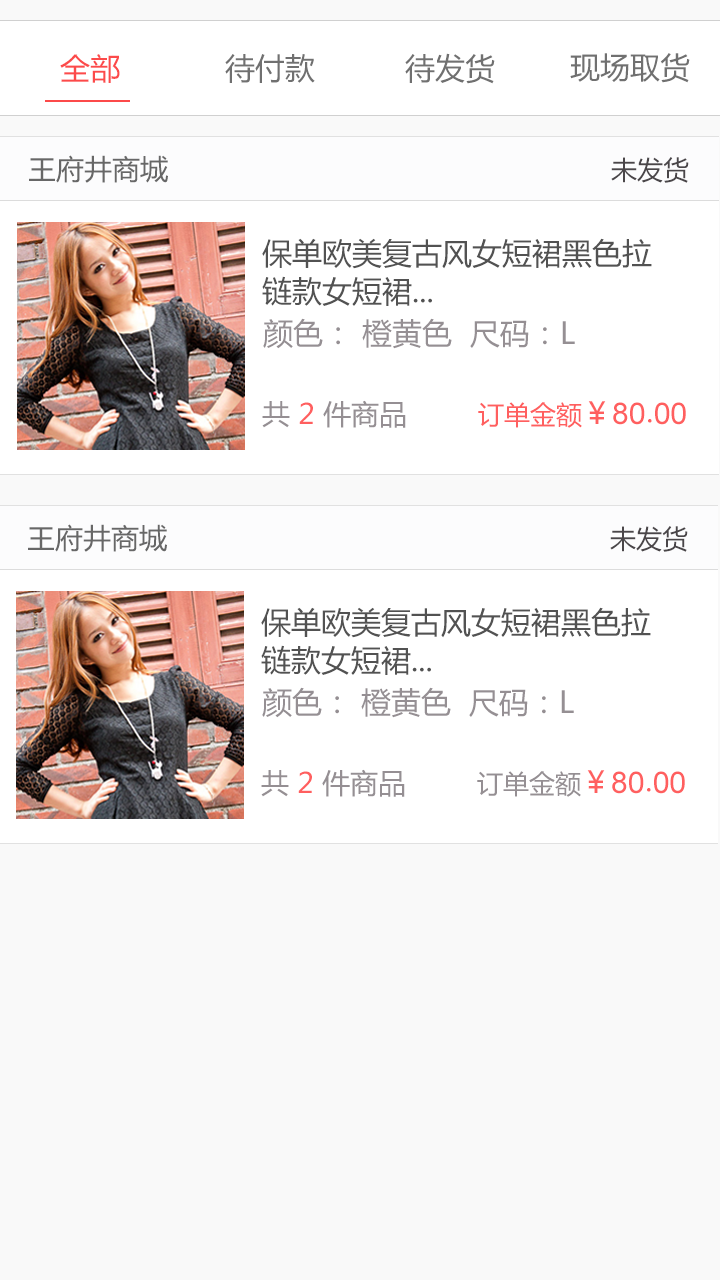
<style>
.page{position:relative;width:720px;height:1280px;background:#f9f9f9}
.page>*{position:absolute;margin:0}
.t1{font:30px "MicrosoftYaHei";color:#fc4a4a}
.t2{font:30px "MicrosoftYaHei";color:#707070}
.t3{font:28px "MicrosoftYaHei";color:#666666}
.t4{font:26px "MicrosoftYaHei";color:#4a4649}
.t5{font:30px/38px "MicrosoftYaHei";color:#525252}
.t6{font:30px "MicrosoftYaHei";color:#958f93}
.t7{font:28px "MicrosoftYaHei";color:#958f93}
.t8{font:28px "MicrosoftYaHei";color:#ff5f5f}
.t9{font:26px "MicrosoftYaHei";color:#ff5f5f}
.t10{font:30px "MicrosoftYaHei";color:#ff5f5f}
.t11{font:30px "ArialMT";color:#ff5f5f}
.t12{font:30px "STHeitiSC-Light";color:#ff5f5f}
.t13{font:26px "MicrosoftYaHei";color:#958f93}
</style>
<div class="page">
<p class="t1" style="left:60px;top:54px;width:60px;height:29px">全部</p>
<p class="t2" style="left:225px;top:54px;width:90px;height:29px">待付款</p>
<p class="t2" style="left:405px;top:53px;width:90px;height:31px">待发货</p>
<p class="t2" style="left:570px;top:53px;width:120px;height:30px">现场取货</p>
<p class="t3" style="left:29px;top:155px;width:139px;height:28px">王府井商城</p>
<p class="t4" style="left:611px;top:157px;width:78px;height:26px">未发货</p>
<p class="t5" style="left:262px;top:238px;width:390px;height:68px">保单欧美复古风女短裙黑色拉<br>链款女短裙...</p>
<p class="t6" style="left:263px;top:318px;width:312px;height:31px">颜色： 橙黄色  尺码：L</p>
<p class="t7" style="left:262px;top:400px;width:144px;height:28px">共 <span class="t8">2 </span>件商品</p>
<p class="t9" style="left:478px;top:401px;width:208px;height:27px">订单金额<span class="t10">￥</span><span class="t11">80</span><span class="t12">.</span><span class="t11">00</span></p>
<p class="t3" style="left:28px;top:524px;width:139px;height:28px">王府井商城</p>
<p class="t4" style="left:610px;top:526px;width:78px;height:26px">未发货</p>
<p class="t5" style="left:261px;top:607px;width:390px;height:68px">保单欧美复古风女短裙黑色拉<br>链款女短裙...</p>
<p class="t6" style="left:262px;top:687px;width:312px;height:31px">颜色： 橙黄色  尺码：L</p>
<p class="t7" style="left:261px;top:769px;width:144px;height:28px">共 <span class="t8">2 </span>件商品</p>
<p class="t13" style="left:477px;top:770px;width:208px;height:27px">订单金额<span class="t10">￥</span><span class="t11">80</span><span class="t12">.</span><span class="t11">00</span></p>
</div>
